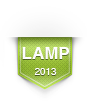
<style>
.page{position:relative;width:87px;height:108px;background:#ffffff}
.page>*{position:absolute;margin:0}
.t1{font:17px "Helvetica-Bold";color:#fefefe}
.t2{font:9.7px "Helvetica";color:#fefefe}
</style>
<div class="page">
<p class="t1" style="left:22px;top:47px;width:47px;height:28px;text-align:center">LAMP<br><br><span class="t2">2013</span></p>
</div>
